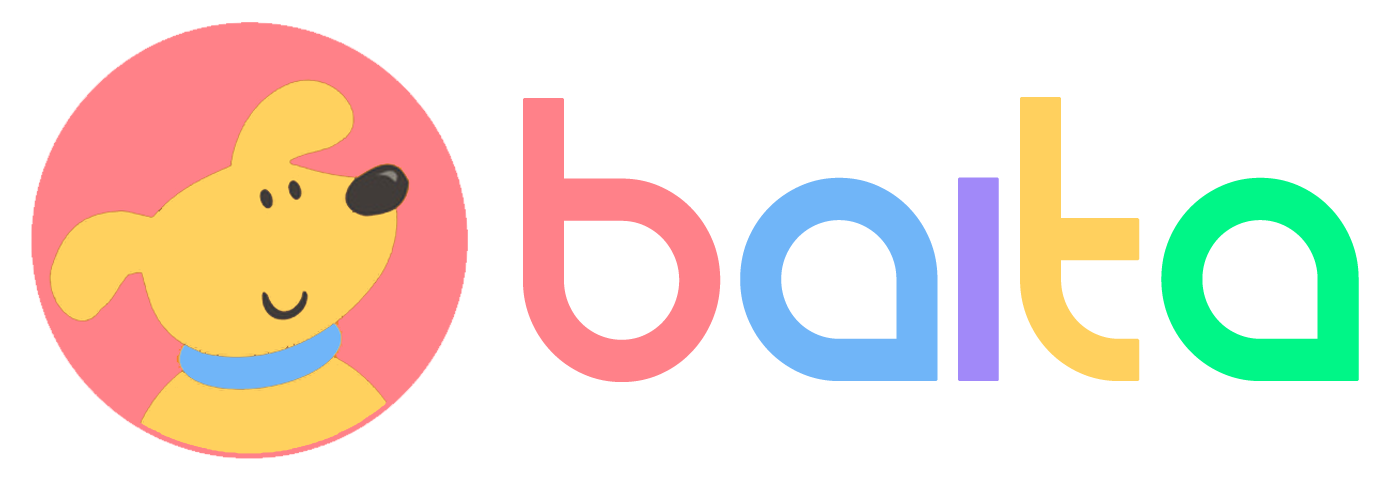
<style>
.page{position:relative;width:1400px;height:480px;background:#ffffff}
.page>*{position:absolute;margin:0}
.t1{font:447.4px "REZ";color:#ff8189;font-weight:bold;scale:0.97 1}
.t2{font:447.4px "REZ";color:#70b5f8;font-weight:bold;scale:0.97 1}
.t3{font:447.4px "REZ";color:#a189f9;font-weight:bold;scale:0.97 1}
.t4{font:447.4px "REZ";color:#ffd05e;font-weight:bold;scale:0.97 1}
.t5{font:447.4px "REZ";color:#00f687;font-weight:bold;scale:0.97 1}
</style>
<div class="page">
<p class="t1" style="left:523px;top:97px;width:836px;height:285px">b<span class="t2">a</span><span class="t3">i</span><span class="t4">t</span><span class="t5">a</span></p>
</div>
